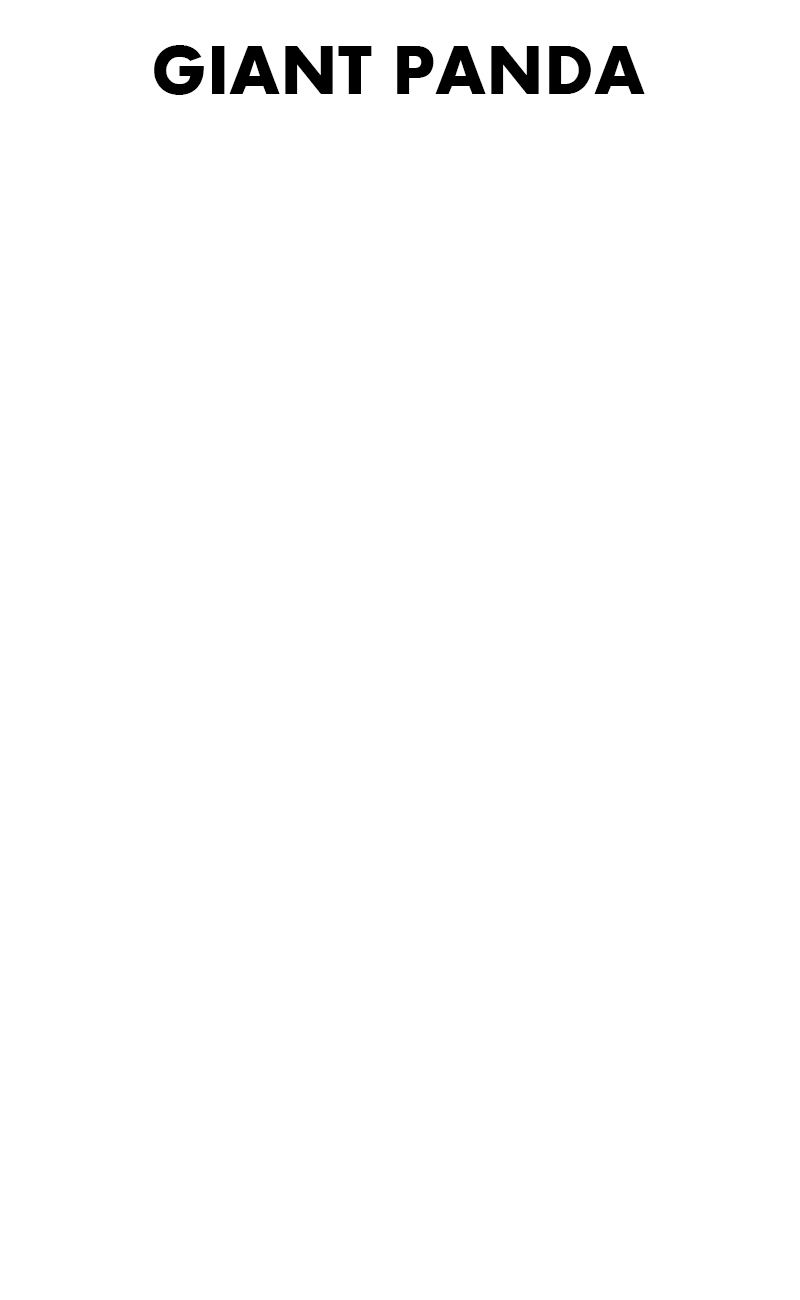
<style>
.page{position:relative;width:800px;height:1300px;background:#ffffff}
.page>*{position:absolute;margin:0}
.t1{font:72px "Aharoni-Bold";color:#000000}
</style>
<div class="page">
<p class="t1" style="left:154px;top:45px;width:491px;height:50px">GIANT PANDA</p>
</div>
